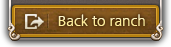
<style>
.page{position:relative;width:171px;height:47px}
.page>*{position:absolute;margin:0}
.t1{font:14px "NanumGothic"}
</style>
<div class="page">
<p class="t1" style="left:58px;top:14px;width:87px;height:12px">Back to ranch</p>
</div>
